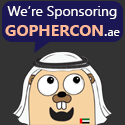
<style>
.page{position:relative;width:125px;height:125px;background:#333333}
.page>*{position:absolute;margin:0}
.t1{font:14px "Leelawadee";color:#ffffff}
.t2{font:16px "Leelawadee-Bold";color:#ffb997}
.t3{font:16px "Leelawadee";color:#ffffff}
.t4{font:12px "Leelawadee";color:#ffffff}
</style>
<div class="page">
<p class="t1" style="left:5px;top:6px;width:115px;height:30px">We’re Sponsoring<br> <span class="t2">GOPHERCON</span><span class="t3">.</span><span class="t4">ae</span></p>
</div>
